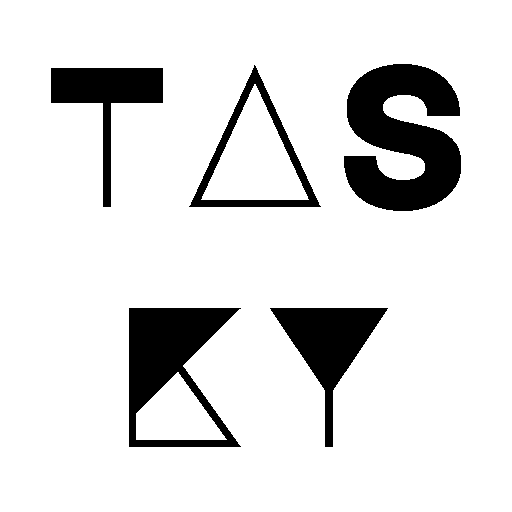
<style>
.page{position:relative;width:512px;height:512px;background:#ffffff}
.page>*{position:absolute;margin:0}
.t1{font:200px "MajorMonoDisplay-Regular";color:#000000}
</style>
<div class="page">
<p class="t1" style="left:51px;top:64px;width:410px;height:383px;text-align:center">TAS<br>KY</p>
</div>
